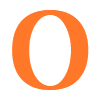
<style>
.page{position:relative;width:100px;height:100px;background:#ffffff}
.page>*{position:absolute;margin:0}
.t1{font:152px "H2mjrE";letter-spacing:0.025em;color:#ff7728}
</style>
<div class="page">
<p class="t1" style="left:12px;top:10px;width:77px;height:80px">o</p>
</div>
